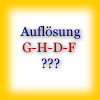
<style>
.page{position:relative;width:100px;height:100px}
.page>*{position:absolute;margin:0}
.t1{font:13.3px "Georgia";color:#000080}
.t2{font:13.3px "Georgia";color:#b10000}
</style>
<div class="page">
<p class="t1" style="left:20px;top:26px;width:61px;height:43px;text-align:center">Auflösung<br><span class="t2">G-H-D-F</span> <br>???</p>
</div>
